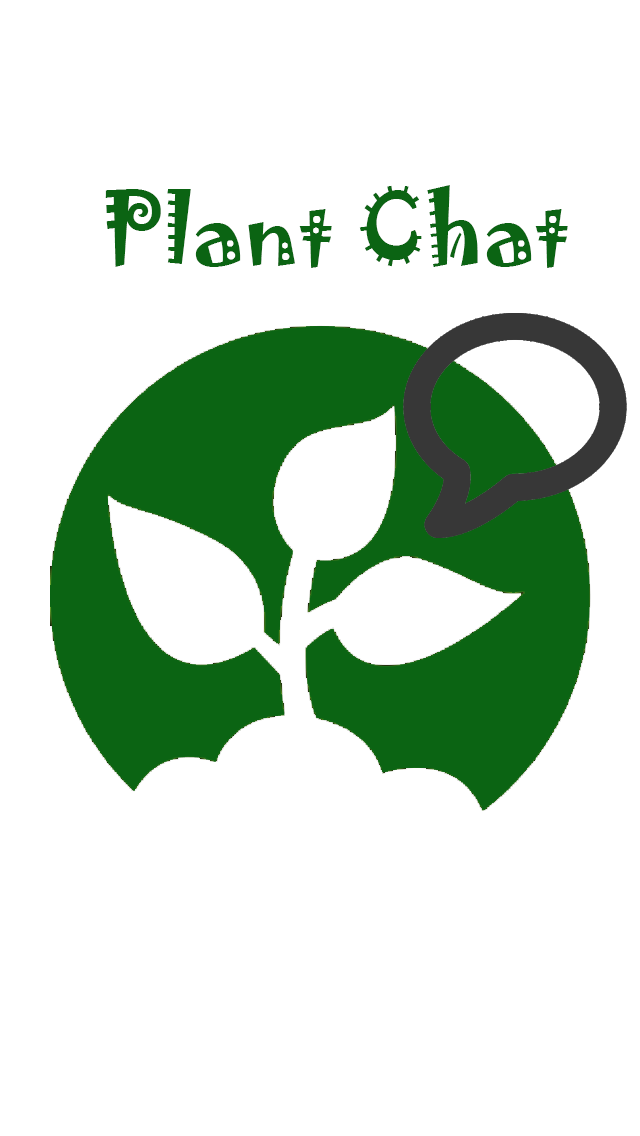
<style>
.page{position:relative;width:640px;height:1136px;background:#ffffff}
.page>*{position:absolute;margin:0}
.t1{font:90px "Jokerman-Regular";color:#0b6413}
</style>
<div class="page">
<p class="t1" style="left:105px;top:185px;width:463px;height:83px">Plant Chat</p>
</div>
